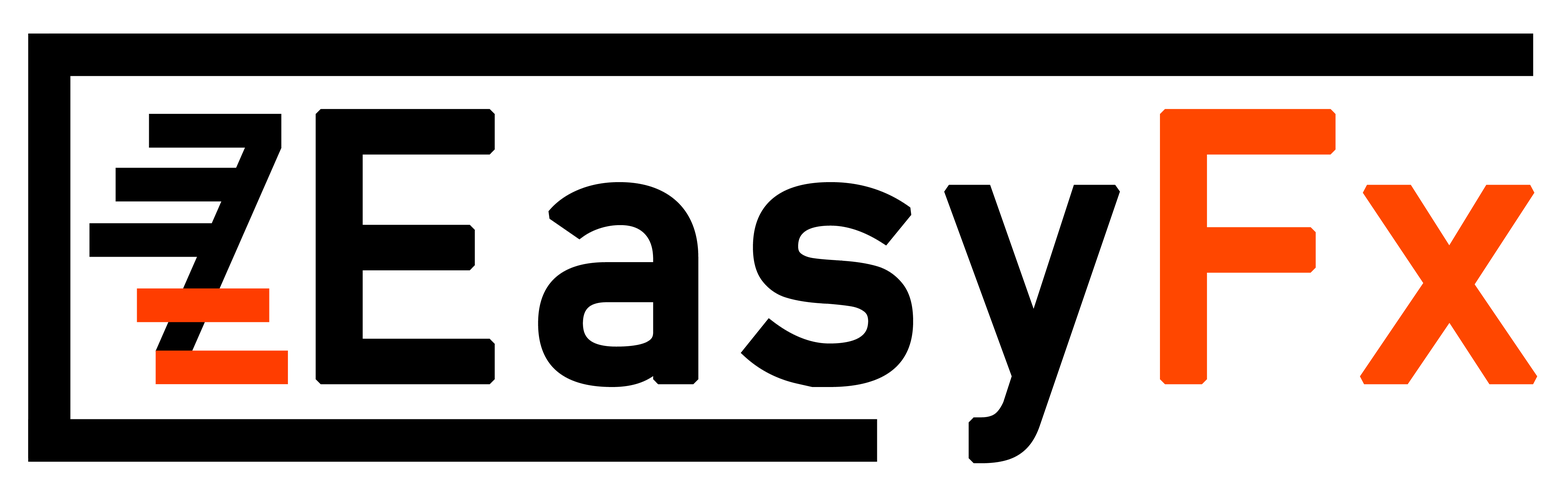
<style>
.page{position:relative;width:1568px;height:498px;background:#ffffff}
.page>*{position:absolute;margin:0}
.t1{font:373.3px "Bahnschrift";letter-spacing:0.01em;color:#000000;font-weight:bold}
.t2{font:373.3px "Bahnschrift";letter-spacing:0.01em;color:#ff4700;font-weight:bold}
</style>
<div class="page">
<p class="t1" style="left:315px;top:109px;width:1222px;height:354px">Easy<span class="t2">Fx</span></p>
</div>
